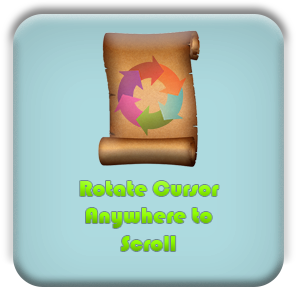
<style>
.page{position:relative;width:300px;height:300px}
.page>*{position:absolute;margin:0}
.t1{font:23px "Bauhaus93"}
</style>
<div class="page">
<p class="t1" style="left:80px;top:181px;width:139px;height:70px;text-align:center">Rotate Cursor<br>Anywhere to Scroll</p>
</div>
